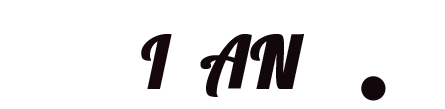
<style>
.page{position:relative;width:445px;height:109px;background:#ffffff}
.page>*{position:absolute;margin:0}
.t1{font:72px "Lobster1.3";color:#12070a;text-transform:uppercase;font-weight:bold}
.t2{font:72px "Lobster1.3";color:#15070a;text-transform:uppercase;font-weight:bold}
.t3{font:72px "Lobster1.3";color:#ffffff;text-transform:uppercase;font-weight:bold}
.t4{font:130px "Lobster1.3";color:#12070a;text-transform:uppercase;font-weight:bold}
</style>
<div class="page">
<p class="t1" style="left:141px;top:34px;width:163px;height:73px"><span class="t2">i</span><span class="t3">l</span>an</p>
<p class="t4" style="left:361px;top:76px;width:25px;height:25px">.</p>
</div>
